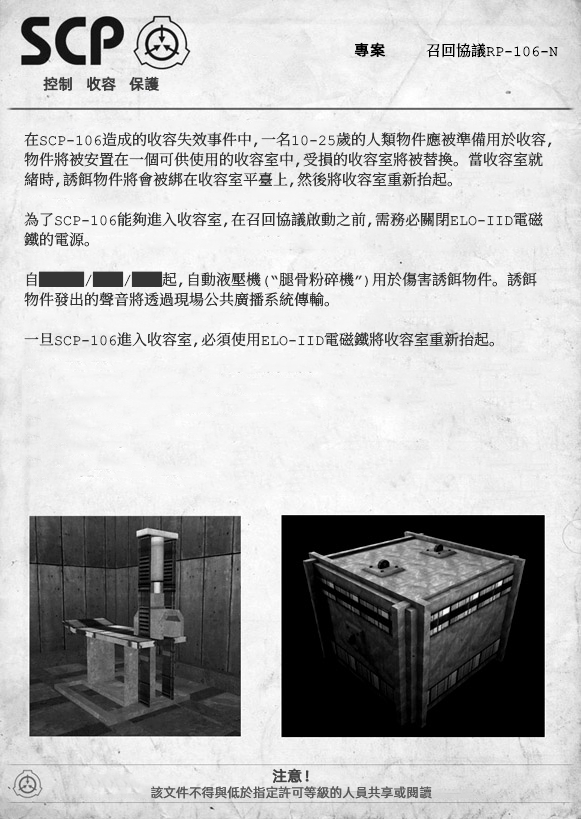
<style>
.page{position:relative;width:581px;height:819px}
.page>*{position:absolute;margin:0}
.t1{font:15px "ContainmentBreach-Regular";color:#000000}
.t2{font:15px "AlibabaPuHuiTiR";color:#000000;font-weight:bold}
.t3{font:15px "AlibabaPuHuiTiR";color:#3d3d3d;font-weight:bold}
.t4{font:15px/20px "ContainmentBreach-Regular";color:#353535}
.t5{font:15px "AlibabaPuHuiTiR";color:#414141;font-weight:bold}
.t6{font:13px "AlibabaPuHuiTiR";color:#575757}
</style>
<div class="page">
<p class="t1" style="left:354px;top:42px;width:204px;height:16px"><span class="t2">專案  </span>召回協議RP-106-N</p>
<p class="t3" style="left:43px;top:76px;width:116px;height:15px">控制   收容   保護</p>
<p class="t4" style="left:24px;top:132px;width:528px;height:216px">在SCP-106造成的收容失效事件中，一名10-25歲的人類物件應被準備用於收容，<br>物件將被安置在一個可供使用的收容室中，受損的收容室將被替換。當收容室就<br>緒時，誘餌物件將會被綁在收容室平臺上，然後將收容室重新抬起。<br><br>為了SCP-106能夠進入收容室，在召回協議啟動之前，需務必關閉ELO-IID電磁<br>鐵的電源。<br><br>自███/██/██起，自動液壓機（“腿骨粉碎機”）用於傷害誘餌物件。誘餌<br>物件發出的聲音將透過現場公共廣播系統傳輸。<br><br>一旦SCP-106進入收容室，必須使用ELO-IID電磁鐵將收容室重新抬起。</p>
<p class="t5" style="left:272px;top:768px;width:37px;height:15px">注意！</p>
<p class="t6" style="left:151px;top:786px;width:281px;height:13px">該文件不得與低於指定許可等級的人員共享或閱讀</p>
</div>
